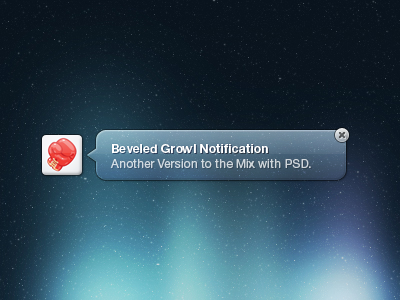
<style>
.page{position:relative;width:400px;height:300px}
.page>*{position:absolute;margin:0}
.t1{font:12px "HelveticaNeue-Bold";letter-spacing:0.02em;color:#ffffff}
.t2{font:12px "HelveticaNeue-Roman";letter-spacing:0.01em;color:#d0d8dd}
</style>
<div class="page">
<p class="t1" style="left:112px;top:144px;width:156px;height:10px">Beveled Growl Notification</p>
<p class="t2" style="left:110px;top:159px;width:201px;height:9px">Another Version to the Mix with PSD.</p>
</div>
